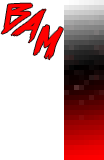
<style>
.page{position:relative;width:104px;height:160px;background:#ffffff}
.page>*{position:absolute;margin:0}
.t1{font:30.4px "outrunfuture";color:#ff0000;text-transform:uppercase;scale:0.9 1}
.t2{font:32px "outrunfuture";color:#ff0000;text-transform:uppercase;scale:0.95 1}
.t3{font:30.3px "outrunfuture";color:#ff0000;text-transform:uppercase;scale:0.94 1}
</style>
<div class="page">
<p class="t1" style="left:1px;top:3px;width:32px;height:31px">b</p>
<p class="t2" style="left:11px;top:9px;width:35px;height:34px;rotate:11deg">a</p>
<p class="t3" style="left:33px;top:25px;width:30px;height:35px;rotate:7deg">m</p>
</div>
